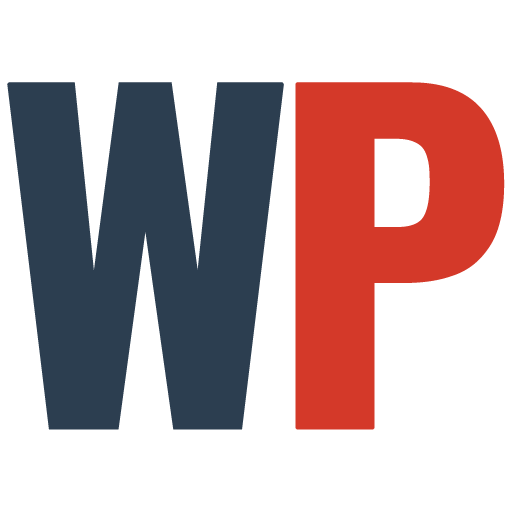
<style>
.page{position:relative;width:512px;height:512px;background:#ffffff}
.page>*{position:absolute;margin:0}
.t1{font:425px "Oswald-Bold";letter-spacing:-0.08em;color:#2c3e50;font-weight:bold}
.t2{font:425px "Oswald-Bold";letter-spacing:-0.08em;color:#d43929;font-weight:bold}
</style>
<div class="page">
<p class="t1" style="left:7px;top:82px;width:498px;height:348px">W<span class="t2">P</span></p>
</div>
